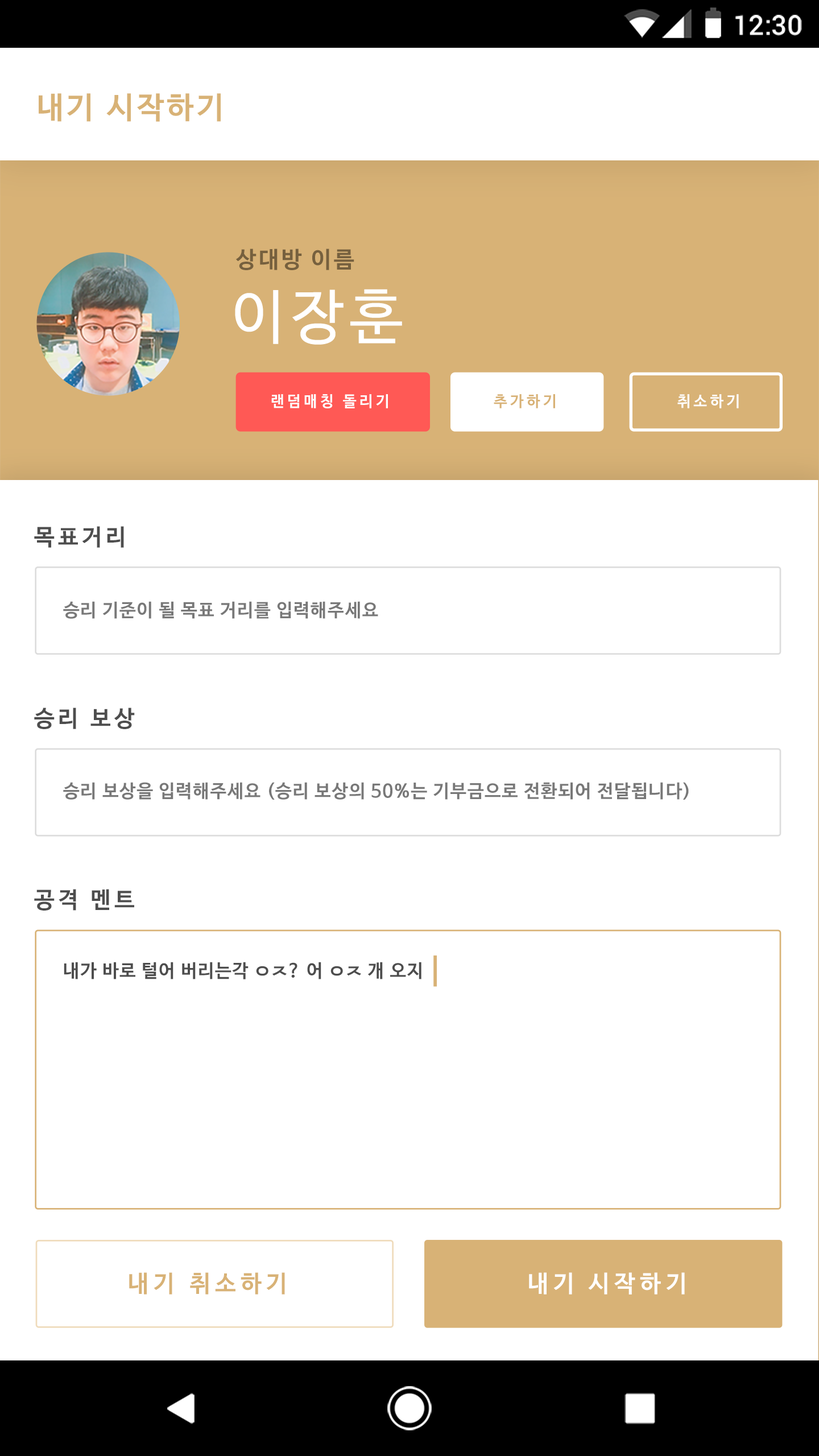
<style>
.page{position:relative;width:819px;height:1456px;background:#ffffff}
.page>*{position:absolute;margin:0}
.t1{font:27.3px "Roboto-Medium";color:#ffffff}
.t2{font:30.3px "NanumBarunGothicBold";letter-spacing:0.1em;color:#d8b276}
.t3{font:22.7px "NanumBarunGothicBold";letter-spacing:0.1em;color:#76603e}
.t4{font:59.1px "NanumBarunGothic";letter-spacing:0.1em;color:#ffffff}
.t5{font:15.2px "NanumBarunGothicBold";letter-spacing:0.2em;color:#fefefe}
.t6{font:15.2px "NanumBarunGothicBold";letter-spacing:0.2em;color:#d8b276}
.t7{font:15.2px "NanumBarunGothicBold";letter-spacing:0.2em;color:#ffffff}
.t8{font:22.7px "NanumBarunGothicBold";letter-spacing:0.16em;color:#4d4d4d}
.t9{font:18.2px "NanumBarunGothicBold";letter-spacing:0.05em;color:#787878}
.t10{font:18.2px "NanumBarunGothicBold";letter-spacing:0.05em;color:#4d4d4d}
.t11{font:23.6px "NanumBarunGothicBold";letter-spacing:0.2em;color:#d8b276}
.t12{font:23.6px "NanumBarunGothicBold";letter-spacing:0.2em;color:#ffffff}
</style>
<div class="page">
<p class="t1" style="left:735px;top:15px;width:67px;height:21px">12:30</p>
<p class="t2" style="left:39px;top:93px;width:182px;height:29px">내기 시작하기</p>
<p class="t3" style="left:235px;top:249px;width:119px;height:21px">상대방 이름</p>
<p class="t4" style="left:235px;top:289px;width:167px;height:56px">이장훈</p>
<p class="t5" style="left:271px;top:394px;width:117px;height:14px">랜덤매칭 돌리기</p>
<p class="t6" style="left:494px;top:394px;width:61px;height:14px">추가하기</p>
<p class="t7" style="left:677px;top:394px;width:62px;height:14px">취소하기</p>
<p class="t8" style="left:34px;top:526px;width:90px;height:22px">목표거리</p>
<p class="t9" style="left:63px;top:601px;width:315px;height:18px">승리 기준이 될 목표 거리를 입력해주세요</p>
<p class="t8" style="left:34px;top:708px;width:101px;height:21px">승리 보상</p>
<p class="t9" style="left:63px;top:782px;width:626px;height:18px">승리 보상을 입력해주세요 (승리 보상의 50%는 기부금으로 전환되어 전달됩니다)</p>
<p class="t8" style="left:34px;top:889px;width:100px;height:22px">공격 멘트</p>
<p class="t10" style="left:64px;top:962px;width:357px;height:17px">내가 바로 털어 버리는각 ㅇㅈ? 어 ㅇㅈ 개 오지</p>
<p class="t11" style="left:129px;top:1272px;width:156px;height:22px">내기 취소하기</p>
<p class="t12" style="left:529px;top:1272px;width:156px;height:22px">내기 시작하기</p>
</div>
